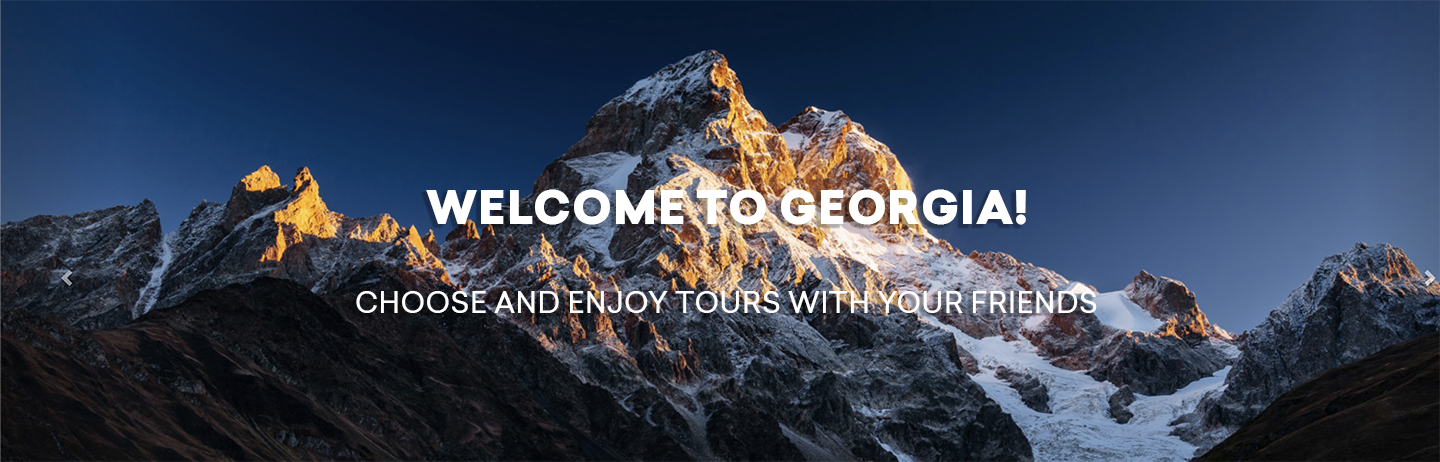
<style>
.page{position:relative;width:1440px;height:462px}
.page>*{position:absolute;margin:0}
.t1{font:45.4px "TBCSailec-Black";color:#ffffff;text-transform:uppercase}
.t2{font:28.3px "TBCSailec-Medium";color:#ffffff;text-transform:uppercase}
</style>
<div class="page">
<p class="t1" style="left:426px;top:189px;width:600px;height:36px">Welcome to Georgia!</p>
<p class="t2" style="left:356px;top:291px;width:741px;height:22px">Choose and enjoy tours with your friends</p>
</div>
